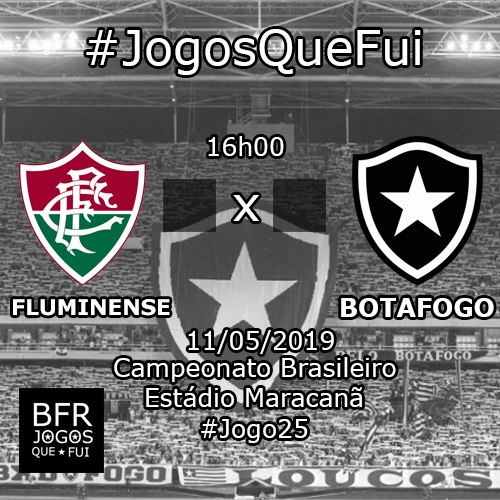
<style>
.page{position:relative;width:500px;height:500px}
.page>*{position:absolute;margin:0}
.t1{font:48px "Verdana";color:#ffffff}
.t2{font:25px "Verdana";color:#ffffff}
.t3{font:21.6px "Verdana-Bold";color:#ffffff}
.t4{font:25px "Verdana-Bold";color:#ffffff}
</style>
<div class="page">
<p class="t1" style="left:86px;top:29px;width:335px;height:46px">#JogosQueFui</p>
<p class="t2" style="left:208px;top:136px;width:76px;height:20px">16h00</p>
<p class="t1" style="left:233px;top:195px;width:26px;height:26px">x</p>
<p class="t3" style="left:13px;top:299px;width:157px;height:17px">FLUMINENSE</p>
<p class="t4" style="left:341px;top:298px;width:153px;height:19px">BOTAFOGO</p>
<p class="t2" style="left:188px;top:330px;width:146px;height:24px">11/05/2019</p>
<p class="t2" style="left:114px;top:357px;width:282px;height:25px">Campeonato Brasileiro</p>
<p class="t2" style="left:146px;top:386px;width:216px;height:21px">Estádio Maracanã</p>
<p class="t2" style="left:201px;top:419px;width:107px;height:24px">#Jogo25</p>
</div>
